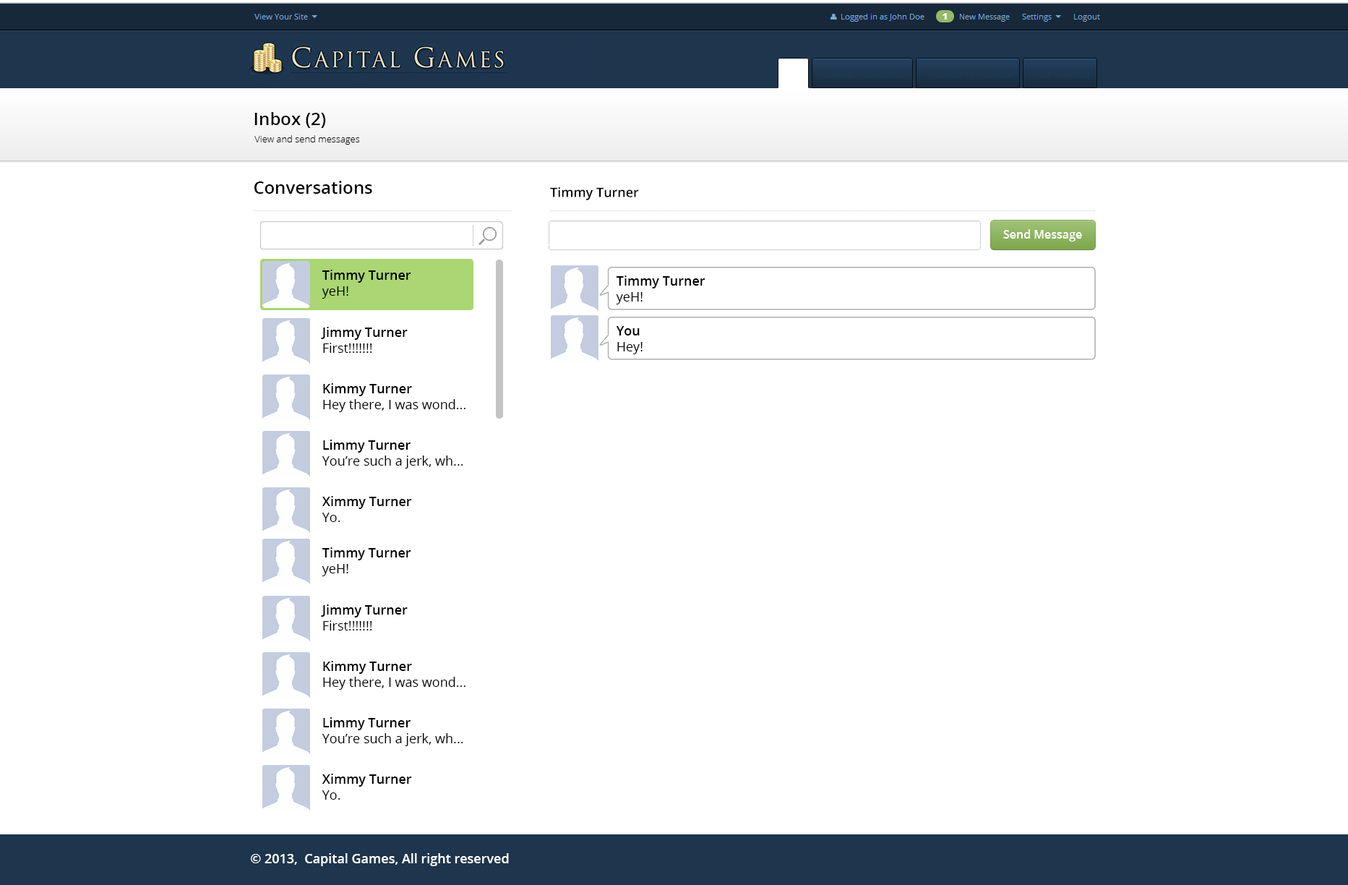
<style>
.page{position:relative;width:1348px;height:885px;background:#ffffff}
.page>*{position:absolute;margin:0}
.t1{font:17.3px "OpenSans-Semibold";color:#000000}
.t2{font:9.4px "OpenSans-Light";color:#000000}
.t3{font:13px "OpenSans-Semibold";color:#000000}
.t4{font:11.6px "OpenSans-Semibold";color:#ffffff}
.t5{font:13px "OpenSans";color:#000000}
.t6{font:13px "OpenSans-Semibold";color:#ffffff}
</style>
<div class="page">
<p class="t1" style="left:254px;top:112px;width:72px;height:16px">Inbox (2)</p>
<p class="t2" style="left:254px;top:135px;width:106px;height:10px">View and send messages</p>
<p class="t1" style="left:254px;top:181px;width:118px;height:13px">Conversations</p>
<p class="t3" style="left:550px;top:187px;width:89px;height:13px">Timmy Turner</p>
<p class="t4" style="left:1003px;top:229px;width:79px;height:12px">Send Message</p>
<p class="t3" style="left:322px;top:270px;width:89px;height:28px">Timmy Turner<span class="t5"> <br>yeH!</span></p>
<p class="t3" style="left:616px;top:275px;width:89px;height:29px">Timmy Turner<span class="t5"> <br>yeH!</span></p>
<p class="t3" style="left:321px;top:327px;width:87px;height:26px">Jimmy Turner<span class="t5"> <br>First!!!!!!!</span></p>
<p class="t5" style="left:616px;top:326px;width:27px;height:28px"><span class="t3">You<br></span>Hey!</p>
<p class="t5" style="left:323px;top:383px;width:142px;height:29px"><span class="t3">Kimmy Turner</span> <br>Hey there, I was wond...</p>
<p class="t5" style="left:322px;top:439px;width:141px;height:29px"><span class="t3">Limmy Turner</span> <br>You’re such a jerk, wh...</p>
<p class="t3" style="left:322px;top:496px;width:90px;height:26px">Ximmy Turner<span class="t5"> <br>Yo.</span></p>
<p class="t3" style="left:322px;top:547px;width:89px;height:29px">Timmy Turner<span class="t5"> <br>yeH!</span></p>
<p class="t3" style="left:321px;top:604px;width:87px;height:26px">Jimmy Turner<span class="t5"> <br>First!!!!!!!</span></p>
<p class="t5" style="left:323px;top:661px;width:142px;height:29px"><span class="t3">Kimmy Turner</span> <br>Hey there, I was wond...</p>
<p class="t5" style="left:322px;top:717px;width:141px;height:29px"><span class="t3">Limmy Turner</span> <br>You’re such a jerk, wh...</p>
<p class="t3" style="left:322px;top:773px;width:90px;height:26px">Ximmy Turner<span class="t5"> <br>Yo.</span></p>
<p class="t6" style="left:251px;top:853px;width:258px;height:13px">© 2013,  Capital Games, All right reserved</p>
</div>
